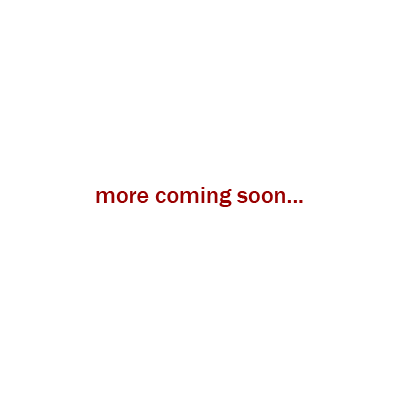
<style>
.page{position:relative;width:400px;height:400px;background:#ffffff}
.page>*{position:absolute;margin:0}
.t1{font:24px "FranklinGothic-Medium";color:#990000}
</style>
<div class="page">
<p class="t1" style="left:96px;top:187px;width:207px;height:20px">more coming soon...</p>
</div>
